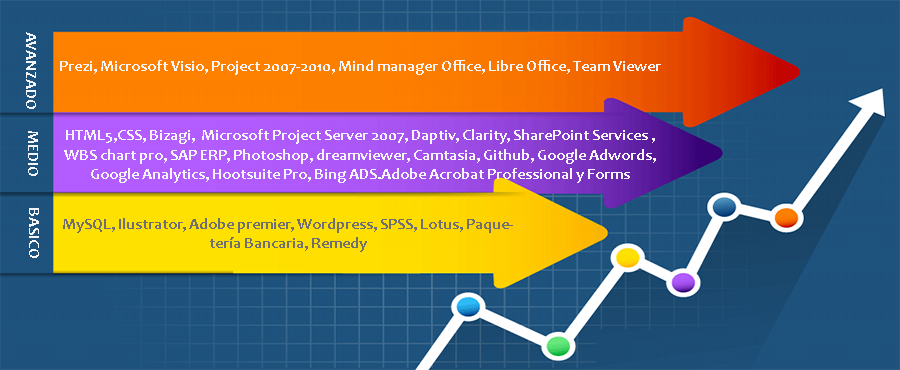
<style>
.page{position:relative;width:900px;height:370px}
.page>*{position:absolute;margin:0}
.t1{font:15.9px "Candara-Bold";color:#f4f4f9}
.t2{font:15.9px "Candara-Bold";color:#707072}
</style>
<div class="page">
<p class="t1" style="left:26px;top:32px;width:10px;height:77px;rotate:90deg">AVANZADO</p>
<p class="t1" style="left:60px;top:60px;width:601px;height:15px">Prezi, Microsoft Visio, Project 2007-2010, Mind manager Office, Libre Office, Team Viewer</p>
<p class="t1" style="left:28px;top:131px;width:10px;height:45px;rotate:90deg">MEDIO</p>
<p class="t1" style="left:64px;top:129px;width:592px;height:54px;text-align:center">HTML5,CSS, Bizagi,  Microsoft Project Server 2007, Daptiv, Clarity, SharePoint Services , WBS chart pro, SAP ERP, Photoshop, dreamviewer, Camtasia, Github, Google Adwords, Google Analytics, Hootsuite Pro, Bing ADS.Adobe Acrobat Professional y Forms</p>
<p class="t1" style="left:29px;top:208px;width:10px;height:50px;rotate:90deg">BASICO</p>
<p class="t2" style="left:63px;top:218px;width:450px;height:34px;text-align:center">MySQL, Ilustrator, Adobe premier, Wordpress, SPSS, Lotus, Paquetería Bancaria, Remedy</p>
</div>
